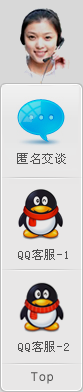
<style>
.page{position:relative;width:83px;height:392px;background:#e8e7e7}
.page>*{position:absolute;margin:0}
.t1{font:12px "SimSun";letter-spacing:0.08em;color:#515151}
.t2{font:12px "ArialMT";letter-spacing:0.08em;color:#515151}
</style>
<div class="page">
<p class="t1" style="left:17px;top:153px;width:49px;height:11px">匿名交谈</p>
<p class="t1" style="left:18px;top:249px;width:50px;height:11px">QQ客服-1</p>
<p class="t1" style="left:18px;top:341px;width:51px;height:11px">QQ客服-2</p>
<p class="t2" style="left:31px;top:372px;width:22px;height:12px">Top</p>
</div>
